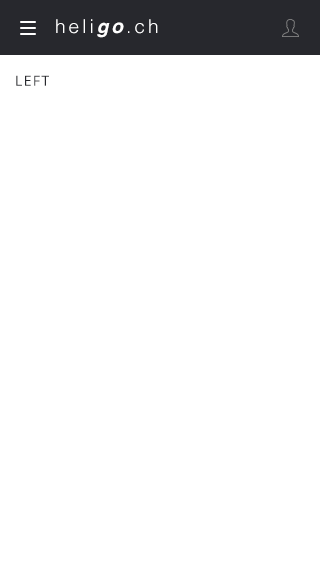
<style>
.page{position:relative;width:320px;height:566px;background:#ffffff}
.page>*{position:absolute;margin:0}
.t1{font:19px "Helvetica-Light";letter-spacing:0.16em;color:#ffffff}
.t2{font:19px "Helvetica-BoldOblique";letter-spacing:0.16em;color:#ffffff}
.t3{font:14px "OpenSans";letter-spacing:0.1em;color:#27282d;text-transform:uppercase}
</style>
<div class="page">
<p class="t1" style="left:56px;top:19px;width:102px;height:19px">heli<span class="t2">go</span>.ch</p>
<p class="t3" style="left:16px;top:75px;width:33px;height:11px">left</p>
</div>
